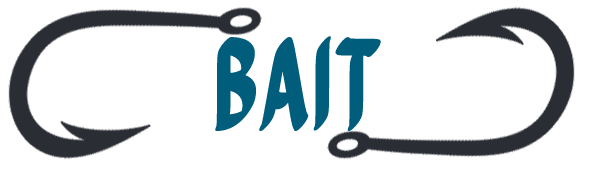
<style>
.page{position:relative;width:589px;height:170px;background:#ffffff}
.page>*{position:absolute;margin:0}
.t1{font:123px "Quiapo_Free";color:#005e7c}
</style>
<div class="page">
<p class="t1" style="left:215px;top:36px;width:166px;height:95px">Bait</p>
</div>
